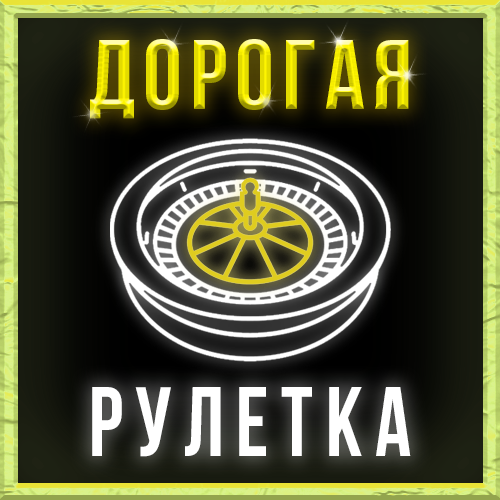
<style>
.page{position:relative;width:500px;height:500px}
.page>*{position:absolute;margin:0}
.t1{font:98px "BebasNeueBold";letter-spacing:0.08em}
.t2{font:98px "BebasNeueBold";letter-spacing:0.14em;color:#ffffff;scale:0.91 1}
</style>
<div class="page">
<p class="t1" style="left:90px;top:39px;width:319px;height:80px">ДОРОГАЯ</p>
<p class="t2" style="left:92px;top:387px;width:319px;height:70px">РУЛЕТКА</p>
</div>
